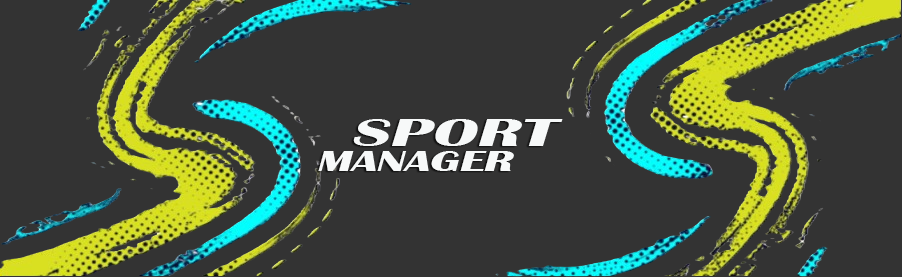
<style>
.page{position:relative;width:902px;height:277px;background:#333333}
.page>*{position:absolute;margin:0}
.t1{font:40.2px "BritannicBold";color:#f7f9f9;font-style:italic;scale:1.73 1}
.t2{font:29.6px "BritannicBold";color:#f7f9f9;font-style:italic;scale:1.57 1}
</style>
<div class="page">
<p class="t1" style="left:353px;top:119px;width:210px;height:27px">SPORT</p>
<p class="t2" style="left:318px;top:151px;width:196px;height:20px">MANAGER</p>
</div>
